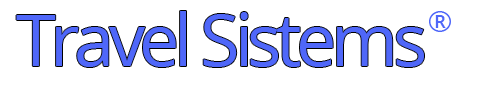
<style>
.page{position:relative;width:479px;height:87px;background:#ffffff}
.page>*{position:absolute;margin:0}
.t1{font:72px "OpenSans";letter-spacing:-0.075em;color:#4f67f9}
.t2{font:30px "OpenSans";letter-spacing:-0.075em;color:#4f67f9}
</style>
<div class="page">
<p class="t1" style="left:16px;top:11px;width:408px;height:56px">Travel Sistems</p>
<p class="t2" style="left:429px;top:11px;width:22px;height:21px">®</p>
</div>
